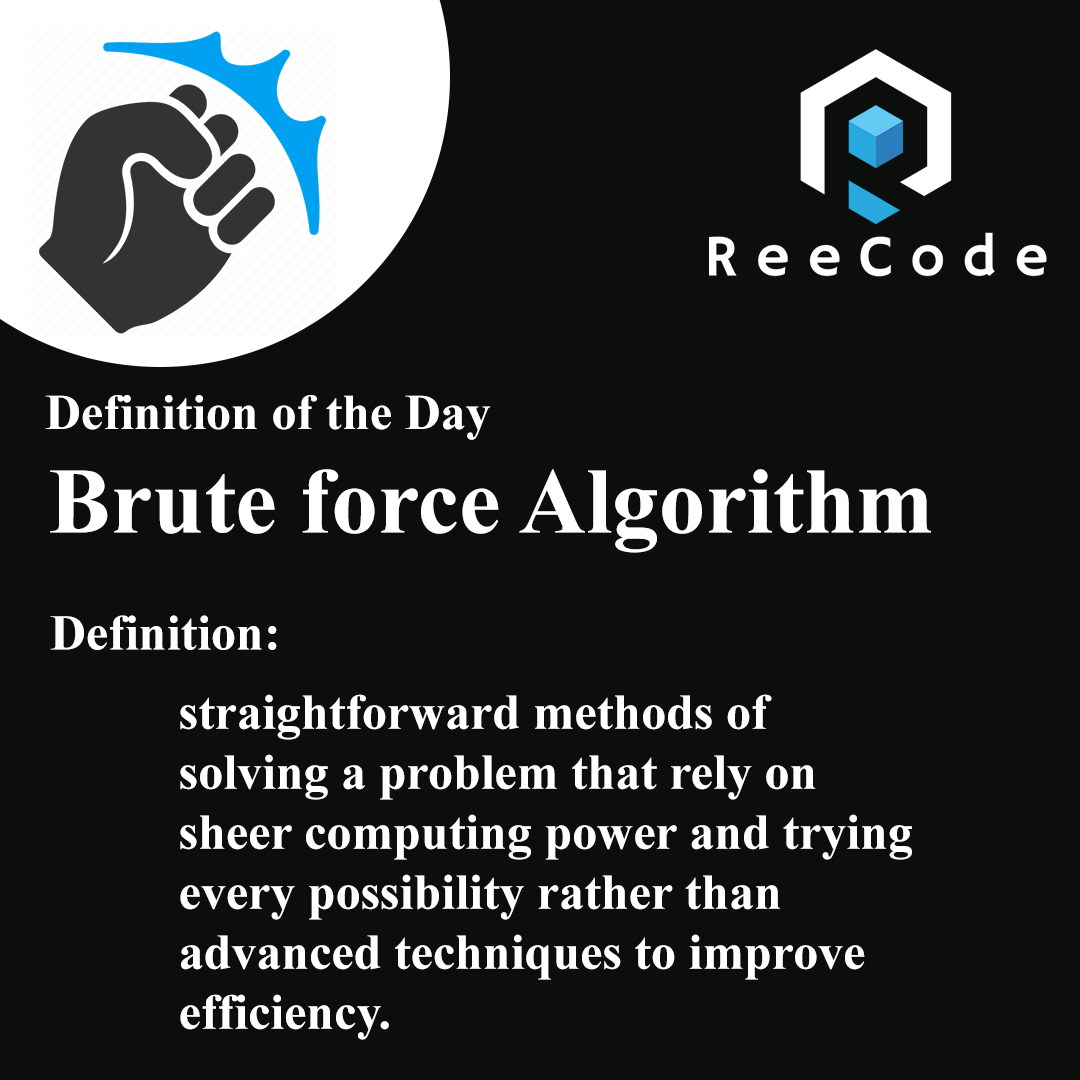
<style>
.page{position:relative;width:1080px;height:1080px;background:#0c0e0c}
.page>*{position:absolute;margin:0}
.t1{font:50px "TimesNewRomanPS-BoldMT";color:#ffffff}
.t2{font:93.4px "TimesNewRomanPS-BoldMT";color:#ffffff}
</style>
<div class="page">
<p class="t1" style="left:45px;top:395px;width:446px;height:45px">Definition of the Day</p>
<p class="t2" style="left:50px;top:469px;width:881px;height:84px">Brute force Algorithm</p>
<p class="t1" style="left:50px;top:615px;width:227px;height:35px">Definition:</p>
<p class="t1" style="left:180px;top:694px;width:732px;height:346px">straightforward methods of solving a problem that rely on sheer computing power and trying every possibility rather than advanced techniques to improve efficiency.</p>
</div>
